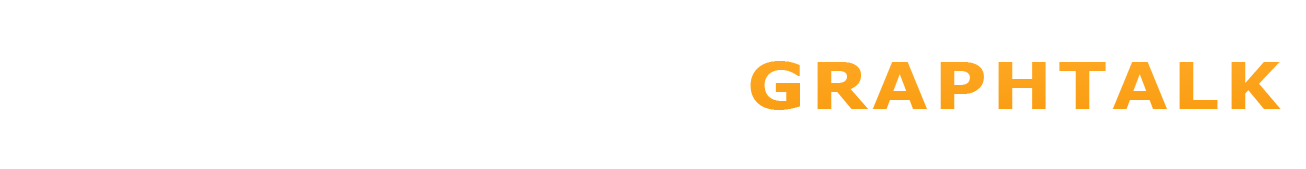
<style>
.page{position:relative;width:1306px;height:169px;background:#ffffff}
.page>*{position:absolute;margin:0}
.t1{font:64.8px "Verdana-Bold";letter-spacing:0.075em;color:#fca21a;scale:1.11 1}
</style>
<div class="page">
<p class="t1" style="left:750px;top:61px;width:531px;height:49px">GRAPHTALK</p>
</div>
